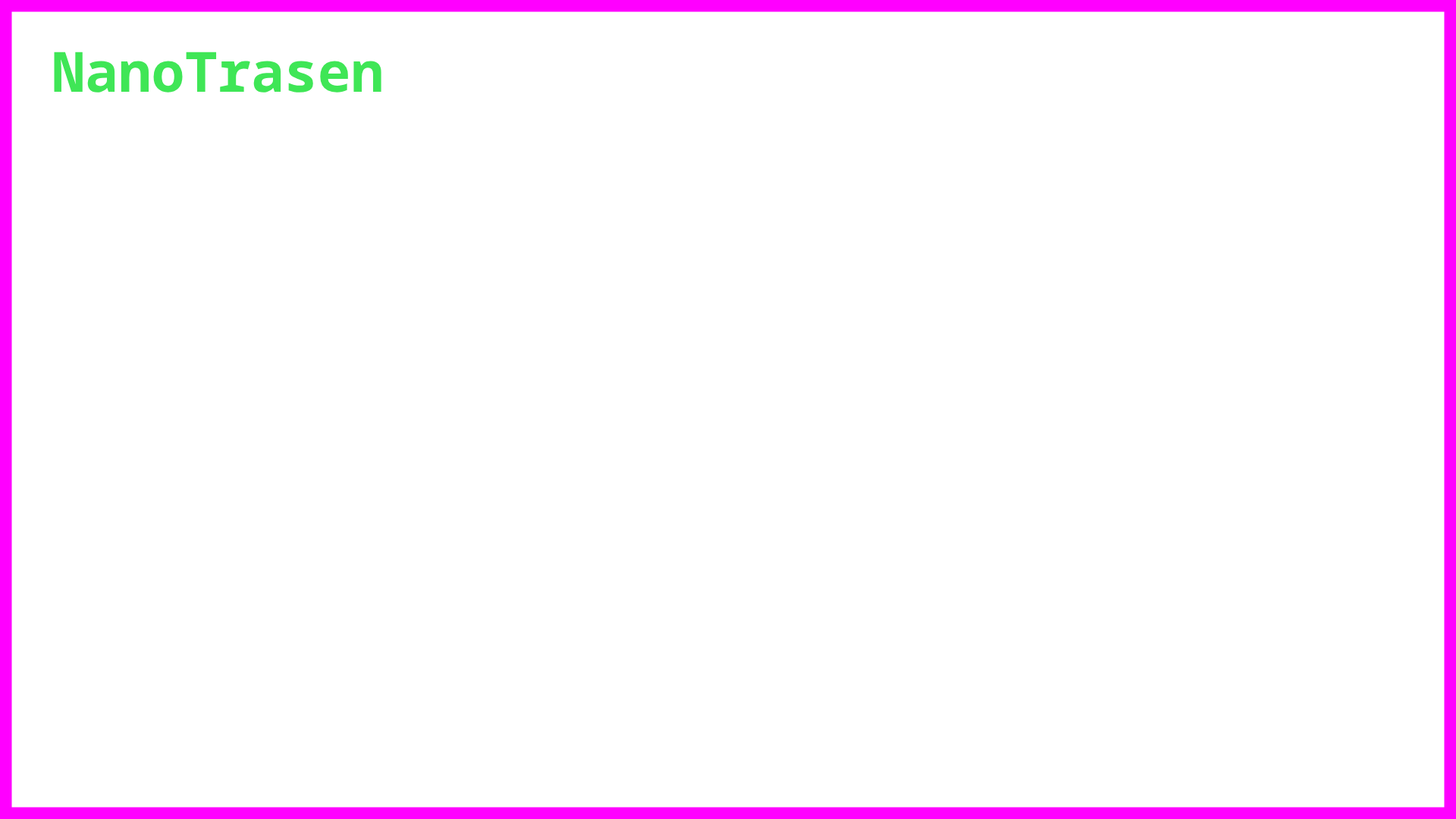
<style>
.page{position:relative;width:1456px;height:819px;background:#ffffff}
.page>*{position:absolute;margin:0}
.t1{font:55.4px "NotoSansMono-Bold";color:#3fe656}
</style>
<div class="page">
<p class="t1" style="left:54px;top:52px;width:327px;height:41px">NanoTrasen</p>
</div>
